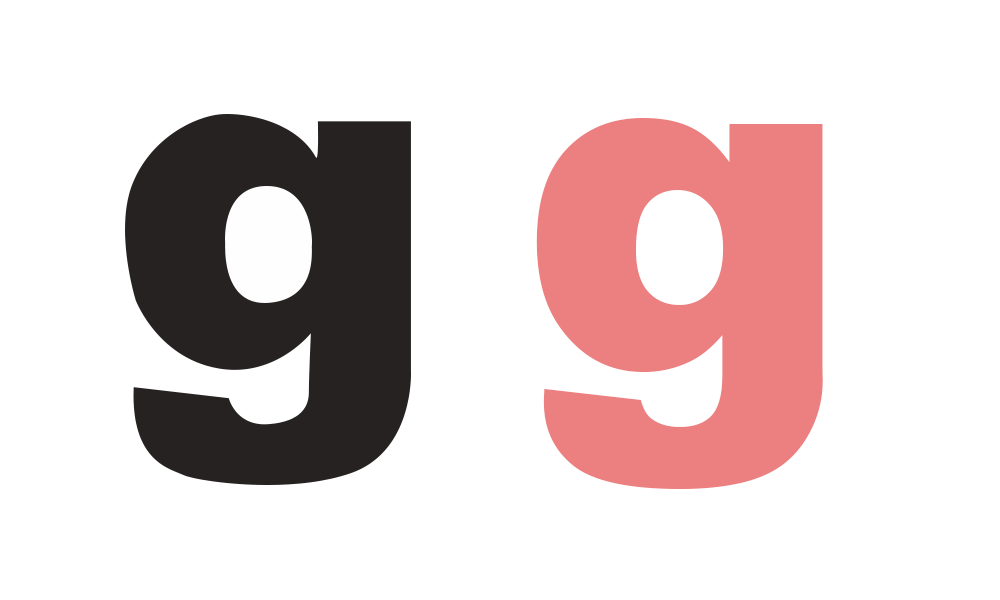
<style>
.page{position:relative;width:1000px;height:600px;background:#ffffff}
.page>*{position:absolute;margin:0}
.t1{font:500px "Arial-Black";color:#ec7f7f}
</style>
<div class="page">
<p class="t1" style="left:536px;top:118px;width:287px;height:371px">g</p>
</div>
